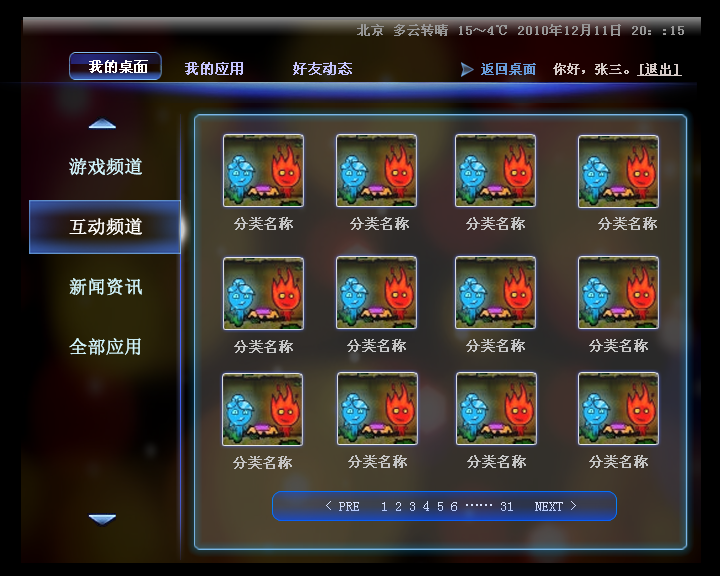
<style>
.page{position:relative;width:720px;height:576px}
.page>*{position:absolute;margin:0}
.t1{font:13px "SimSun";color:#979797;font-weight:bold}
.t2{font:14px "SimSun";color:#ffffff;font-weight:bold}
.t3{font:14px "SimSun";color:#c6c5ff;font-weight:bold}
.t4{font:14px "SimSun";color:#e0f3ff;font-weight:bold}
.t5{font:13px "SimSun";color:#d5cbc8;font-weight:bold}
.t6{font:13px "SimSun";color:#679cda;font-weight:bold}
.t7{font:13px "SimSun";color:#d5cbc8;font-weight:bold;text-decoration:underline}
.t8{font:18px/60px "SimSun";color:#d3f7ff;font-weight:bold}
.t9{font:18px/60px "SimSun";color:#ffffff;font-weight:bold}
.t10{font:14px "SimSun";color:#c5c5c5;font-weight:bold}
.t11{font:14px "SimSun";color:#d7e2ff}
</style>
<div class="page">
<p class="t1" style="left:357px;top:24px;width:327px;height:12px">北京 多云转晴 15～4℃ 2010年12月11日 20：:15</p>
<p class="t2" style="left:89px;top:60px;width:59px;height:13px">我的桌面</p>
<p class="t3" style="left:185px;top:62px;width:167px;height:13px"><span class="t4">    </span>我的应用      好友动态</p>
<p class="t5" style="left:481px;top:63px;width:201px;height:13px"><span class="t6">返回桌面  </span>你好，张三。<span class="t7">[退出]</span></p>
<p class="t8" style="left:69px;top:158px;width:73px;height:198px">游戏频道<br><span class="t9">互动频道<br></span>新闻资讯<br>全部应用</p>
<p class="t10" style="left:350px;top:217px;width:307px;height:13px">分类名称       分类名称         分类名称</p>
<p class="t11" style="left:326px;top:501px;width:250px;height:10px">&lt; PRE   1 2 3 4 5 6 …… 31   NEXT &gt;</p>
</div>
